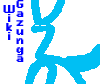
<style>
.page{position:relative;width:100px;height:84px;background:#ffffff}
.page>*{position:absolute;margin:0}
.t1{font:9px "Kroeger0766";color:#0000ff}
</style>
<div class="page">
<p class="t1" style="left:3px;top:0px;width:21px;height:62px">Gazunga<br> Wiki</p>
</div>
